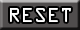
<style>
.page{position:relative;width:80px;height:30px;background:#504d4d}
.page>*{position:absolute;margin:0}
.t1{font:18px "OCRAStd";color:#ffffff}
</style>
<div class="page">
<p class="t1" style="left:10px;top:8px;width:61px;height:14px">RESET</p>
</div>
